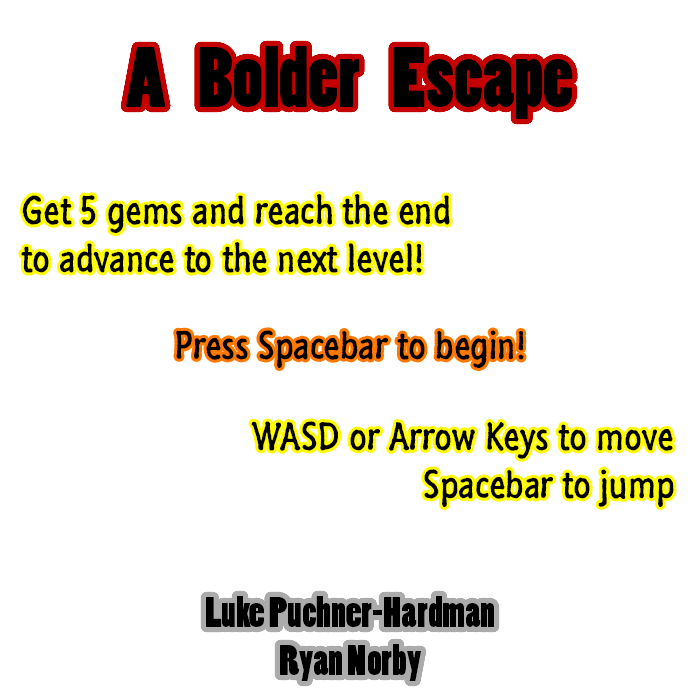
<style>
.page{position:relative;width:700px;height:700px;background:#ffffff}
.page>*{position:absolute;margin:0}
.t1{font:80px "PoplarStd";color:#000000}
.t2{font:40px "SegoeMarker";color:#000000}
.t3{font:40px "PoplarStd";color:#000000}
</style>
<div class="page">
<p class="t1" style="left:126px;top:46px;width:447px;height:73px">A    Bolder    Escape</p>
<p class="t2" style="left:21px;top:194px;width:429px;height:79px">Get 5 gems and reach the end<br>to advance to the next level!</p>
<p class="t2" style="left:176px;top:330px;width:348px;height:38px">Press Spacebar to begin!</p>
<p class="t2" style="left:251px;top:421px;width:423px;height:86px;text-align:right">WASD or Arrow Keys to move<br>Spacebar to jump</p>
<p class="t3" style="left:206px;top:596px;width:288px;height:85px;text-align:center">Luke Puchner-Hardman<br>Ryan Norby</p>
</div>
